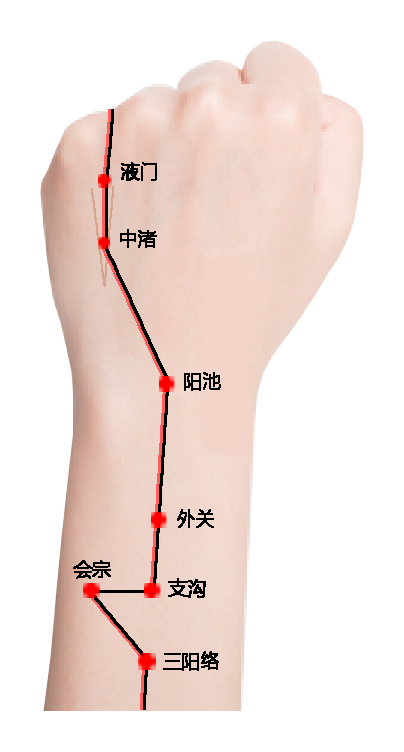
<style>
.page{position:relative;width:404px;height:752px;background:#ffffff}
.page>*{position:absolute;margin:0}
.t1{font:18.7px "MicrosoftYaHei";color:#000000;font-weight:bold}
</style>
<div class="page">
<p class="t1" style="left:121px;top:162px;width:36px;height:19px">液门</p>
<p class="t1" style="left:120px;top:229px;width:37px;height:19px">中渚</p>
<p class="t1" style="left:184px;top:372px;width:37px;height:19px">阳池</p>
<p class="t1" style="left:177px;top:509px;width:37px;height:19px">外关</p>
<p class="t1" style="left:73px;top:560px;width:38px;height:19px">会宗</p>
<p class="t1" style="left:168px;top:578px;width:38px;height:20px">支沟</p>
<p class="t1" style="left:163px;top:651px;width:56px;height:20px">三阳络</p>
</div>
